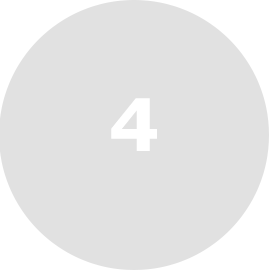
<style>
.page{position:relative;width:270px;height:270px;background:#e1e1e1}
.page>*{position:absolute;margin:0}
.t1{font:72px "Verdana-Bold";color:#ffffff}
</style>
<div class="page">
<p class="t1" style="left:111px;top:98px;width:46px;height:53px">4</p>
</div>
